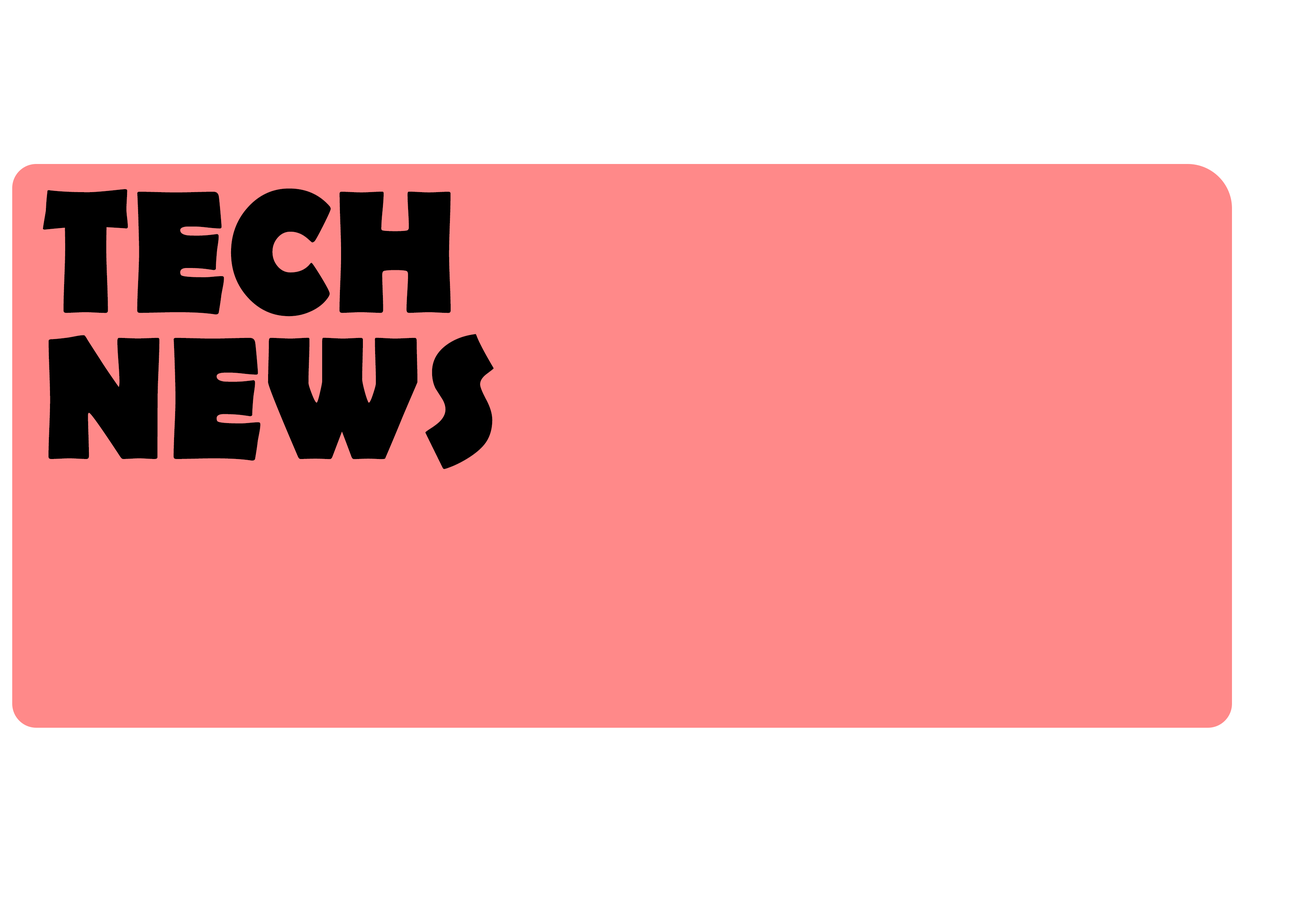
<style>
.page{position:relative;width:1299px;height:918px;background:#ff8989}
.page>*{position:absolute;margin:0}
.t1{font:176.7px/146.2px "BerlinSansFB-Bold";letter-spacing:0.01em;color:#000000;scale:0.91 1}
</style>
<div class="page">
<p class="t1" style="left:43px;top:188px;width:451px;height:281px">TECH <br>NEWS</p>
</div>
